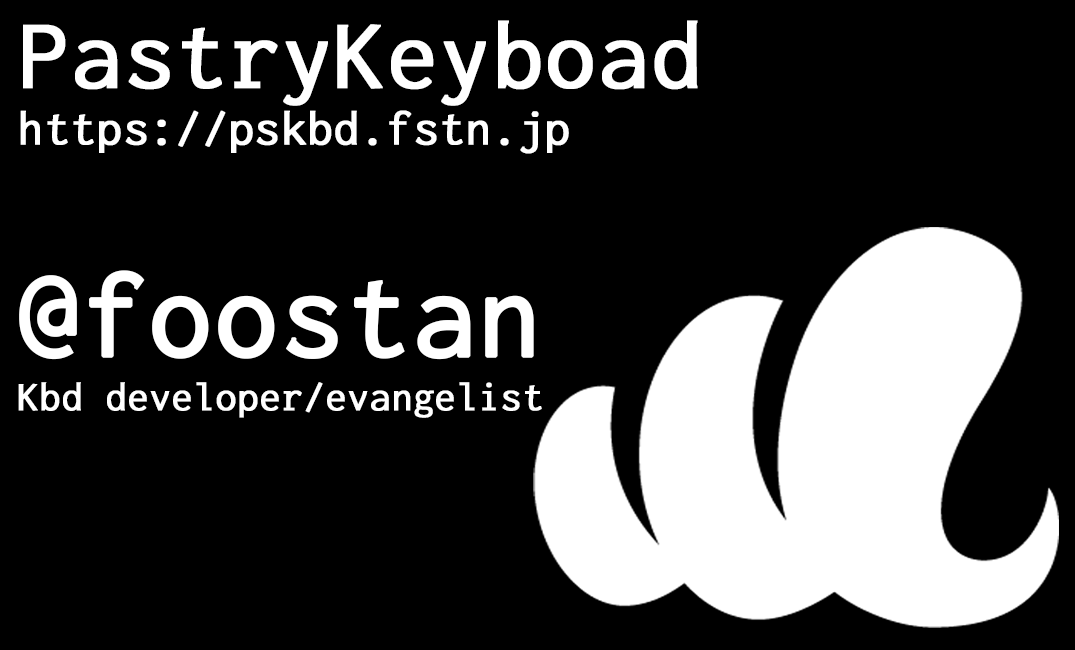
<style>
.page{position:relative;width:1075px;height:650px;background:#000000}
.page>*{position:absolute;margin:0}
.t1{font:41.7px/125px "RictyDiminishedDiscord-Regular";color:#ffffff;font-weight:bold}
.t2{font:100px/100px "RictyDiminishedDiscord-Regular";color:#ffffff;font-weight:bold}
.t3{font:50px/100px "RictyDiminishedDiscord-Regular";color:#ffffff;font-weight:bold}
.t4{font:125px/125px "RictyDiminishedDiscord-Regular";color:#ffffff;font-weight:bold}
</style>
<div class="page">
<p class="t1" style="left:18px;top:20px;width:680px;height:398px"><span class="t2">PastryKeyboad<br></span><span class="t3">https://pskbd.fstn.jp<br><br></span><span class="t4">@foostan<br></span>Kbd developer/evangelist</p>
</div>
